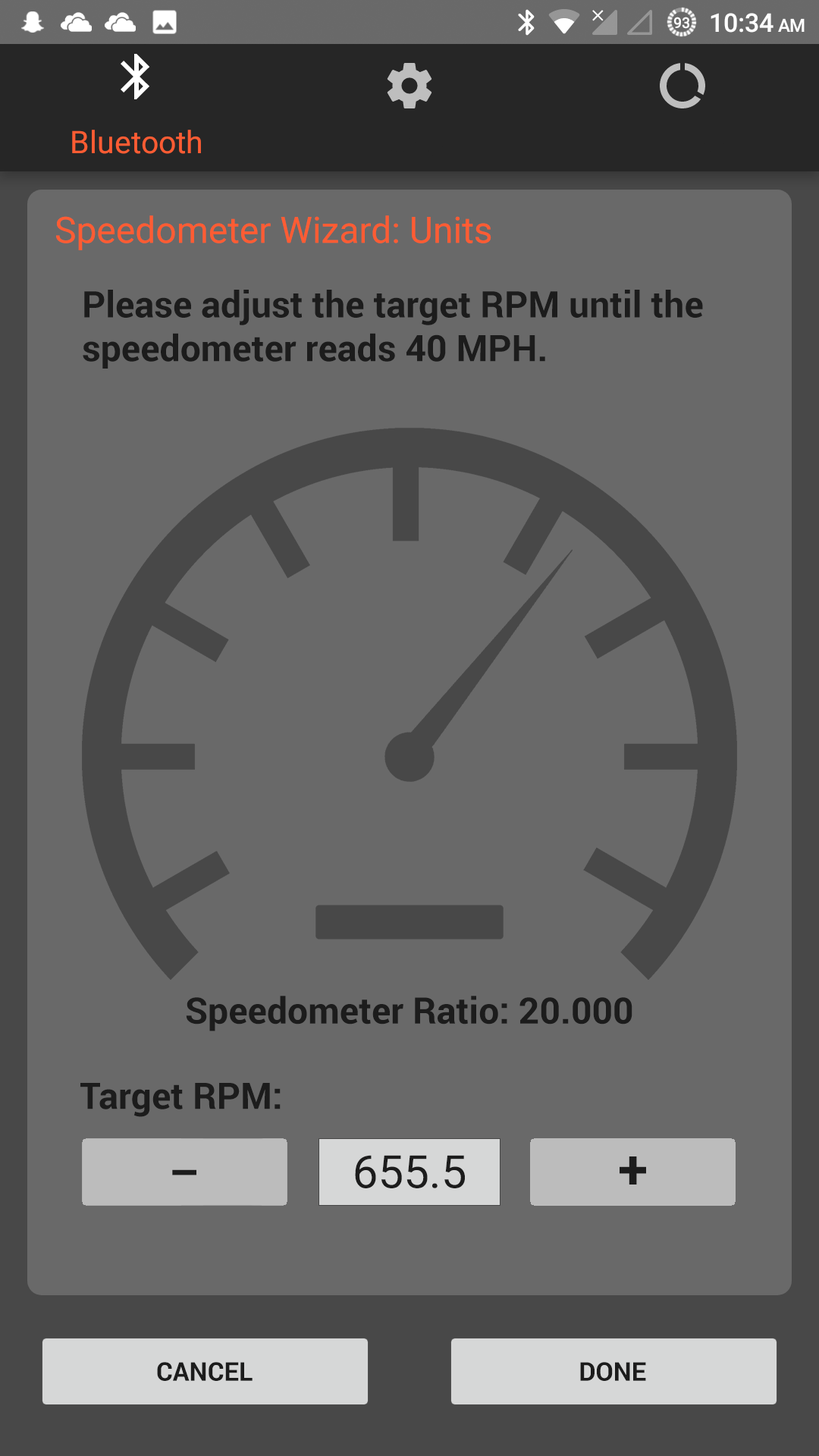
<style>
.page{position:relative;width:819px;height:1456px;background:#696969}
.page>*{position:absolute;margin:0}
.t1{font:36.4px "Roboto-Regular";color:#ff5c33}
.t2{font:36.4px "Roboto-Bold";color:#1c1c1c}
.t3{font:45.5px "Roboto-Regular";color:#1c1c1c}
.t4{font:54.6px "Roboto-Bold";color:#1c1c1c}
.t5{font:45.5px "Roboto-Bold";color:#1c1c1c}
.t6{font:25.8px "Roboto-Bold";color:#1c1c1c}
</style>
<div class="page">
<p class="t1" style="left:56px;top:215px;width:435px;height:35px">Speedometer Wizard: Units</p>
<p class="t2" style="left:83px;top:290px;width:620px;height:79px">Please adjust the target RPM until the<br>speedometer reads 40 MPH.</p>
<p class="t2" style="left:186px;top:996px;width:446px;height:35px">Speedometer Ratio: 20.000</p>
<p class="t2" style="left:80px;top:1083px;width:201px;height:34px">Target RPM:</p>
<p class="t3" style="left:355px;top:1155px;width:110px;height:33px">655.5</p>
<p class="t4" style="left:620px;top:1156px;width:26px;height:29px">+</p>
<p class="t5" style="left:172px;top:1169px;width:24px;height:6px">–</p>
<p class="t6" style="left:157px;top:1362px;width:96px;height:19px">CANCEL</p>
<p class="t6" style="left:580px;top:1362px;width:66px;height:19px">DONE</p>
</div>
